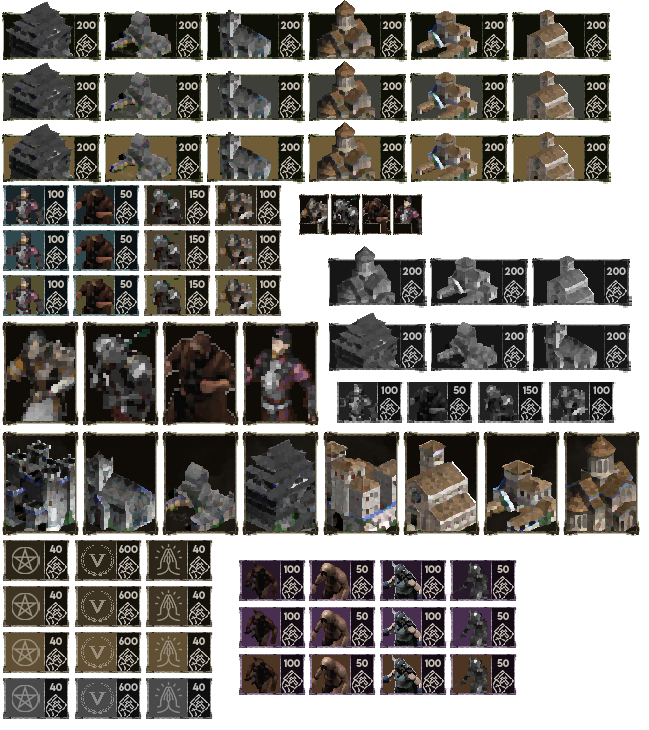
<style>
.page{position:relative;width:649px;height:730px;background:#ffffff}
.page>*{position:absolute;margin:0}
.t1{font:9.4px "LEMONMILK-Medium";color:#c5bdb1}
.t2{font:9.3px "LEMONMILK-Medium";color:#c5bdb1}
</style>
<div class="page">
<p class="t1" style="left:76px;top:21px;width:20px;height:8px">200</p>
<p class="t1" style="left:178px;top:21px;width:20px;height:8px">200</p>
<p class="t1" style="left:280px;top:21px;width:20px;height:8px">200</p>
<p class="t1" style="left:382px;top:21px;width:20px;height:8px">200</p>
<p class="t1" style="left:484px;top:21px;width:20px;height:8px">200</p>
<p class="t1" style="left:586px;top:21px;width:20px;height:8px">200</p>
<p class="t1" style="left:76px;top:82px;width:20px;height:8px">200</p>
<p class="t1" style="left:178px;top:82px;width:20px;height:8px">200</p>
<p class="t1" style="left:280px;top:82px;width:20px;height:8px">200</p>
<p class="t1" style="left:382px;top:82px;width:20px;height:8px">200</p>
<p class="t1" style="left:484px;top:82px;width:20px;height:8px">200</p>
<p class="t1" style="left:586px;top:82px;width:20px;height:8px">200</p>
<p class="t1" style="left:76px;top:143px;width:20px;height:8px">200</p>
<p class="t1" style="left:178px;top:143px;width:20px;height:8px">200</p>
<p class="t1" style="left:280px;top:143px;width:20px;height:8px">200</p>
<p class="t1" style="left:382px;top:143px;width:20px;height:8px">200</p>
<p class="t1" style="left:484px;top:143px;width:20px;height:8px">200</p>
<p class="t1" style="left:586px;top:143px;width:20px;height:8px">200</p>
<p class="t2" style="left:48px;top:190px;width:16px;height:8px">100</p>
<p class="t2" style="left:120px;top:190px;width:12px;height:8px">50</p>
<p class="t2" style="left:189px;top:190px;width:16px;height:8px">150</p>
<p class="t2" style="left:260px;top:190px;width:16px;height:8px">100</p>
<p class="t2" style="left:48px;top:235px;width:16px;height:8px">100</p>
<p class="t2" style="left:120px;top:235px;width:12px;height:8px">50</p>
<p class="t2" style="left:189px;top:235px;width:16px;height:8px">150</p>
<p class="t2" style="left:260px;top:235px;width:16px;height:8px">100</p>
<p class="t2" style="left:48px;top:280px;width:16px;height:8px">100</p>
<p class="t2" style="left:120px;top:280px;width:12px;height:8px">50</p>
<p class="t2" style="left:189px;top:280px;width:16px;height:8px">150</p>
<p class="t2" style="left:260px;top:280px;width:16px;height:8px">100</p>
<p class="t2" style="left:49px;top:545px;width:13px;height:8px">40</p>
<p class="t2" style="left:119px;top:545px;width:19px;height:8px">600</p>
<p class="t2" style="left:192px;top:545px;width:13px;height:8px">40</p>
<p class="t2" style="left:284px;top:565px;width:16px;height:8px">100</p>
<p class="t2" style="left:356px;top:565px;width:12px;height:8px">50</p>
<p class="t2" style="left:425px;top:565px;width:16px;height:8px">100</p>
<p class="t2" style="left:497px;top:565px;width:12px;height:8px">50</p>
<p class="t2" style="left:49px;top:591px;width:13px;height:8px">40</p>
<p class="t2" style="left:119px;top:591px;width:19px;height:8px">600</p>
<p class="t2" style="left:192px;top:591px;width:13px;height:8px">40</p>
<p class="t2" style="left:284px;top:612px;width:16px;height:8px">100</p>
<p class="t2" style="left:356px;top:612px;width:12px;height:8px">50</p>
<p class="t2" style="left:425px;top:612px;width:16px;height:8px">100</p>
<p class="t2" style="left:497px;top:612px;width:12px;height:8px">50</p>
<p class="t2" style="left:49px;top:637px;width:13px;height:8px">40</p>
<p class="t2" style="left:119px;top:637px;width:19px;height:8px">600</p>
<p class="t2" style="left:192px;top:637px;width:13px;height:8px">40</p>
<p class="t2" style="left:284px;top:659px;width:16px;height:8px">100</p>
<p class="t2" style="left:356px;top:659px;width:12px;height:8px">50</p>
<p class="t2" style="left:425px;top:659px;width:16px;height:8px">100</p>
<p class="t2" style="left:497px;top:659px;width:12px;height:8px">50</p>
</div>
